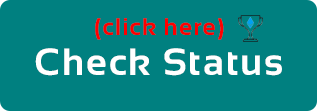
<style>
.page{position:relative;width:317px;height:111px;background:#008080}
.page>*{position:absolute;margin:0}
.t1{font:24px "Sansation-Bold";letter-spacing:0.05em;color:#ff0000}
.t2{font:38px "Sansation-Bold";letter-spacing:0.05em;color:#ffffff}
</style>
<div class="page">
<p class="t1" style="left:95px;top:18px;width:129px;height:22px">(click here)</p>
<p class="t2" style="left:35px;top:48px;width:247px;height:28px">Check Status</p>
</div>
